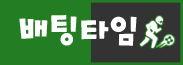
<style>
.page{position:relative;width:183px;height:65px;background:#237d23}
.page>*{position:absolute;margin:0}
.t1{font:32px "TTManwhagageR";color:#ffffff}
</style>
<div class="page">
<p class="t1" style="left:19px;top:15px;width:118px;height:31px">배팅타임</p>
</div>
